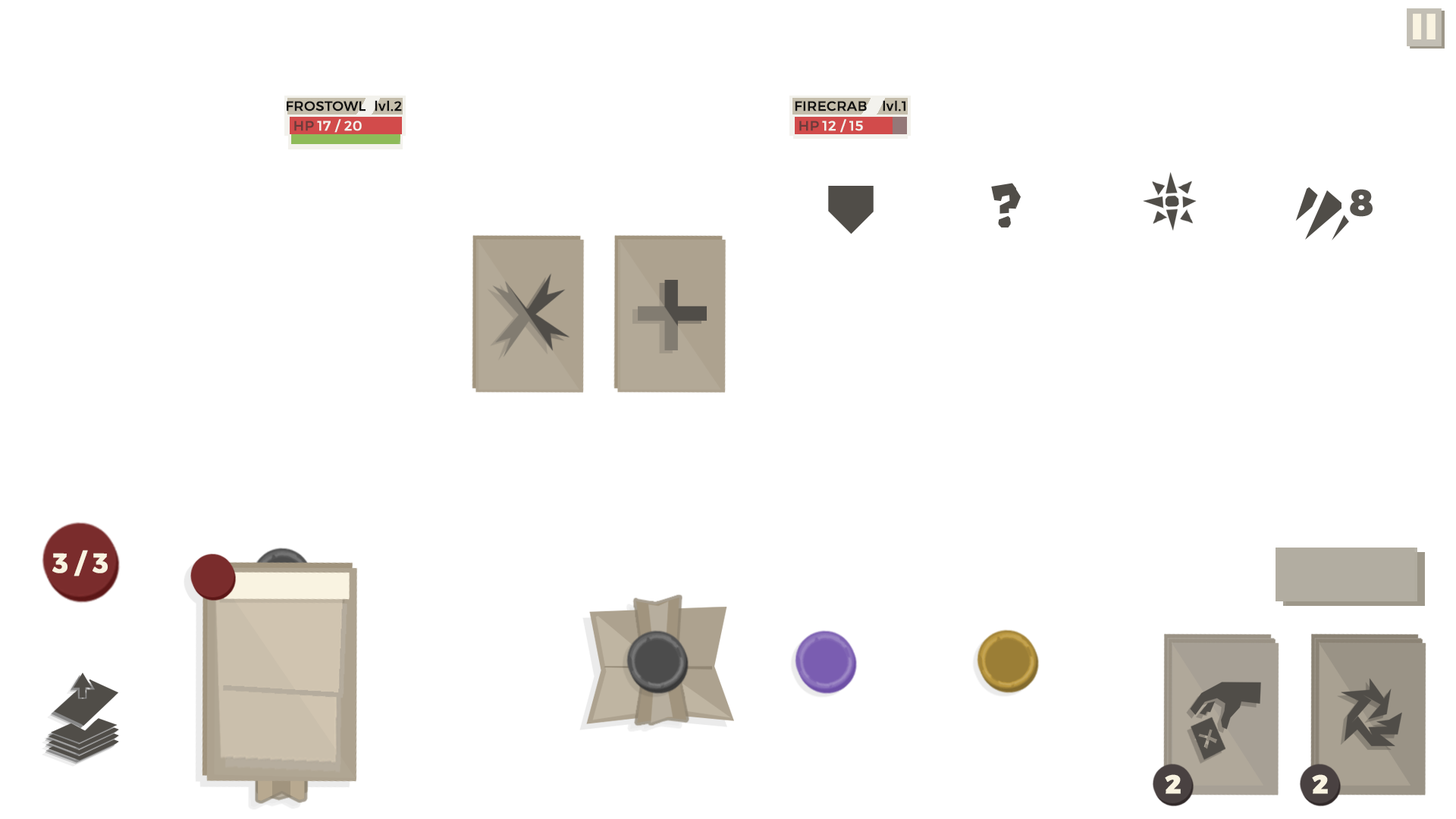
<style>
.page{position:relative;width:1456px;height:819px;background:#ffffff}
.page>*{position:absolute;margin:0}
.t1{font:13.6px "Montserrat-Regular";color:#121212;font-weight:bold}
.t2{font:13.6px "Montserrat-Regular";color:#6b3b3b;font-weight:bold}
.t3{font:13.6px "Montserrat-Regular";color:#f3f2ed;font-weight:bold}
.t4{font:36.4px "Montserrat-ExtraBold";color:#504d48;font-weight:bold}
.t5{font:27.3px "Montserrat-Bold";color:#f9f3e1;font-weight:bold}
.t6{font:26px "Montserrat-ExtraBold";color:#f9f3e1;font-weight:bold}
</style>
<div class="page">
<p class="t1" style="left:287px;top:101px;width:79px;height:10px">FROSTOWL</p>
<p class="t1" style="left:375px;top:100px;width:27px;height:11px">lvl.2</p>
<p class="t1" style="left:795px;top:101px;width:72px;height:10px">FIRECRAB</p>
<p class="t1" style="left:883px;top:100px;width:22px;height:11px">lvl.1</p>
<p class="t2" style="left:294px;top:121px;width:20px;height:10px">HP</p>
<p class="t3" style="left:317px;top:119px;width:45px;height:14px">17 / 20</p>
<p class="t2" style="left:799px;top:121px;width:20px;height:10px">HP</p>
<p class="t3" style="left:822px;top:119px;width:41px;height:14px">12 / 15</p>
<p class="t4" style="left:1350px;top:189px;width:23px;height:28px;opacity:0.96">8</p>
<p class="t5" style="left:52px;top:550px;width:56px;height:26px">3 / 3</p>
<p class="t6" style="left:1165px;top:774px;width:16px;height:20px">2</p>
<p class="t6" style="left:1312px;top:774px;width:16px;height:20px">2</p>
</div>
